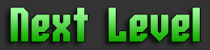
<style>
.page{position:relative;width:210px;height:50px;background:#333333}
.page>*{position:absolute;margin:0}
.t1{font:47.9px "Whitestone-Bold"}
</style>
<div class="page">
<p class="t1" style="left:10px;top:7px;width:190px;height:35px">Next Level</p>
</div>
